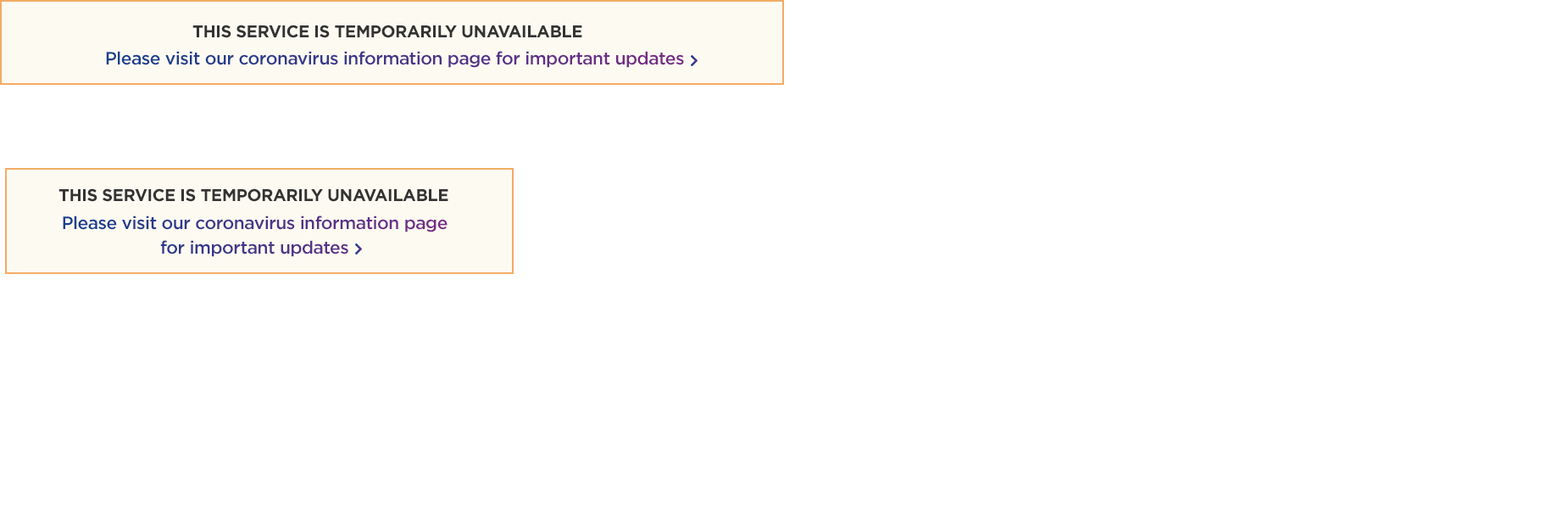
<style>
.page{position:relative;width:1568px;height:509px;background:#ffffff}
.page>*{position:absolute;margin:0}
.t1{font:17px "Gotham-Bold";letter-spacing:-0.025em;color:#333333;text-transform:uppercase}
.t2{font:17.8px "Gotham-Medium";letter-spacing:-0.025em}
.t3{font:17.8px/25px "Gotham-Medium";letter-spacing:-0.025em}
</style>
<div class="page">
<p class="t1" style="left:192px;top:25px;width:390px;height:13px">This service is temporarily unavailable</p>
<p class="t2" style="left:106px;top:51px;width:578px;height:17px">Please visit our coronavirus information page for important updates</p>
<p class="t1" style="left:58px;top:188px;width:390px;height:14px">This service is temporarily unavailable</p>
<p class="t3" style="left:63px;top:215px;width:385px;height:42px;text-align:center">Please visit our coronavirus information page <br>for important updates</p>
</div>
